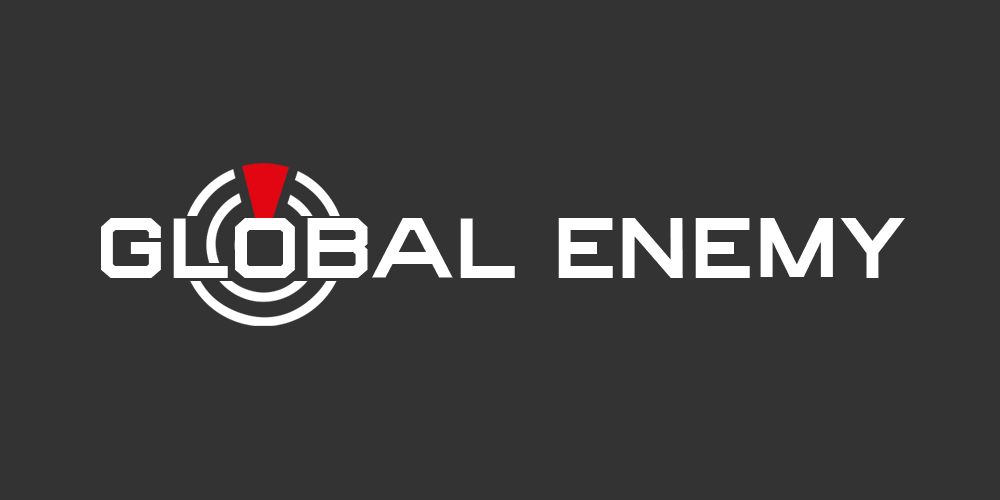
<style>
.page{position:relative;width:1000px;height:500px;background:#333333}
.page>*{position:absolute;margin:0}
.t1{font:100px "AstronomusRegular";color:#ffffff}
</style>
<div class="page">
<p class="t1" style="left:101px;top:218px;width:804px;height:60px">GLOBAL ENEMY</p>
</div>
